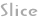
<style>
.page{position:relative;width:40px;height:20px;background:#ffffff}
.page>*{position:absolute;margin:0}
.t1{font:15.9px "ArchitecturePlain";color:#aaaaaa;scale:1.8 1}
</style>
<div class="page">
<p class="t1" style="left:0px;top:2px;width:38px;height:15px">Slice</p>
</div>
